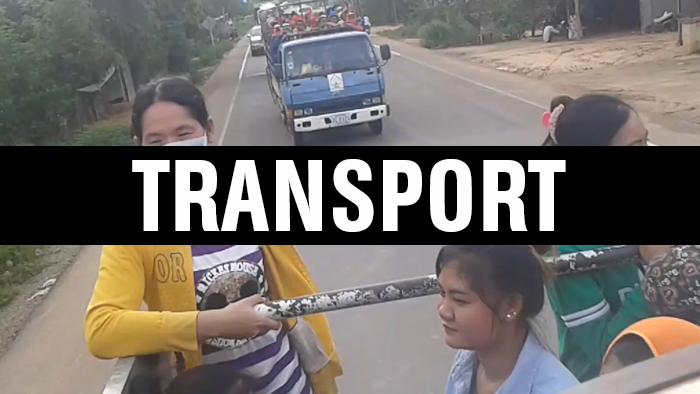
<style>
.page{position:relative;width:700px;height:394px}
.page>*{position:absolute;margin:0}
.t1{font:100px "AGBuchCondensedBQ-Medium";color:#fefefe}
</style>
<div class="page">
<p class="t1" style="left:132px;top:159px;width:434px;height:73px">TRANSPORT</p>
</div>
